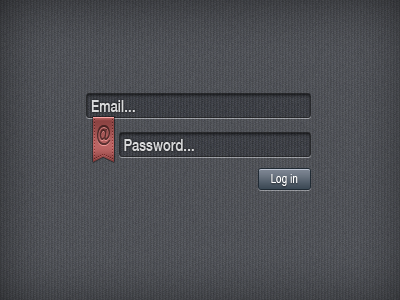
<style>
.page{position:relative;width:400px;height:300px}
.page>*{position:absolute;margin:0}
.t1{font:16.7px "HelveticaNeue-Medium";letter-spacing:0.025em;color:#d8d9da;scale:0.75 1}
.t2{font:20.8px "ArialNarrow";color:#552c2c;scale:0.81 1}
.t3{font:12.5px "HelveticaNeue";letter-spacing:0.025em;color:#ffffff;scale:0.75 1}
</style>
<div class="page">
<p class="t1" style="left:91px;top:100px;width:44px;height:12px">Email...</p>
<p class="t2" style="left:97px;top:125px;width:14px;height:20px">@</p>
<p class="t1" style="left:124px;top:139px;width:70px;height:12px">Password...</p>
<p class="t3" style="left:271px;top:174px;width:27px;height:12px">Log in</p>
</div>
